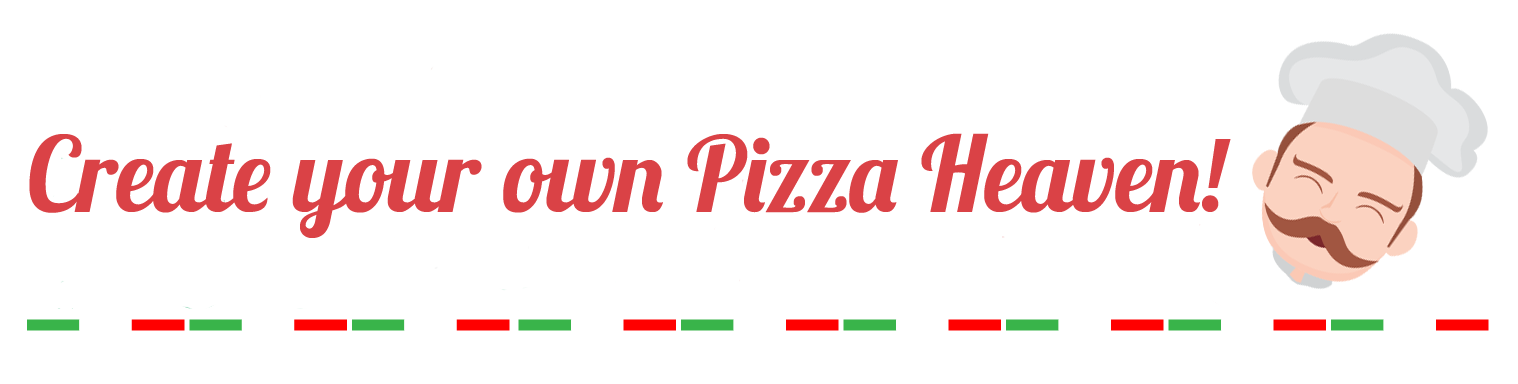
<style>
.page{position:relative;width:1518px;height:384px;background:#ffffff}
.page>*{position:absolute;margin:0}
.t1{font:104.2px "Lobster1.3";color:#da4246}
</style>
<div class="page">
<p class="t1" style="left:29px;top:133px;width:1202px;height:105px">Create your own Pizza Heaven!</p>
</div>
